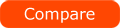
<style>
.page{position:relative;width:120px;height:28px;background:#ff4702}
.page>*{position:absolute;margin:0}
.t1{font:15.8px "Verdana";color:#ffffff}
</style>
<div class="page">
<p class="t1" style="left:24px;top:7px;width:71px;height:16px">Compare</p>
</div>
